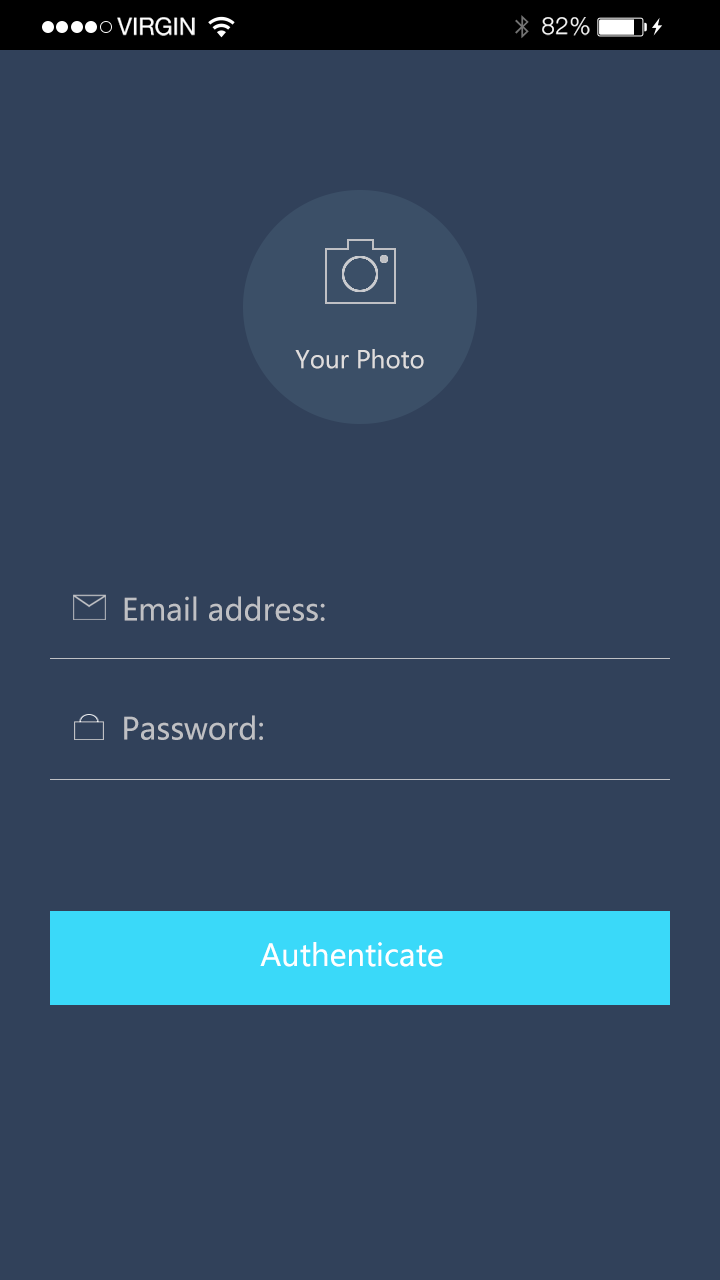
<style>
.page{position:relative;width:720px;height:1280px;background:#31415a}
.page>*{position:absolute;margin:0}
.t1{font:23.9px "HelveticaNeue";color:#ffffff;text-transform:uppercase}
.t2{font:23.9px "HelveticaNeue-Light";letter-spacing:0.025em;color:#ffffff}
.t3{font:24px "MicrosoftYaHei";color:#dfdddd}
.t4{font:30px "MicrosoftYaHei";color:#bfc0c4}
.t5{font:30px "MicrosoftYaHei";color:#ffffff}
</style>
<div class="page">
<p class="t1" style="left:117px;top:17px;width:78px;height:19px">Virgin</p>
<p class="t2" style="left:542px;top:17px;width:48px;height:19px">82%</p>
<p class="t3" style="left:295px;top:349px;width:129px;height:20px">Your Photo</p>
<p class="t4" style="left:124px;top:596px;width:201px;height:25px">Email address:</p>
<p class="t4" style="left:124px;top:715px;width:139px;height:25px">Password:</p>
<p class="t5" style="left:260px;top:942px;width:183px;height:25px">Authenticate</p>
</div>
